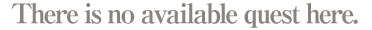
<style>
.page{position:relative;width:372px;height:30px;background:#ffffff}
.page>*{position:absolute;margin:0}
.t1{font:27px "RyuminPro-ExBold";letter-spacing:-0.08em;color:#89837d}
</style>
<div class="page">
<p class="t1" style="left:11px;top:3px;width:347px;height:25px">There is no available quest here.</p>
</div>
